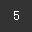
<style>
.page{position:relative;width:32px;height:32px;background:#333333}
.page>*{position:absolute;margin:0}
.t1{font:12px "CenturySchoolbook";letter-spacing:0.06em;color:#ffffff}
</style>
<div class="page">
<p class="t1" style="left:14px;top:11px;width:5px;height:9px">5</p>
</div>
